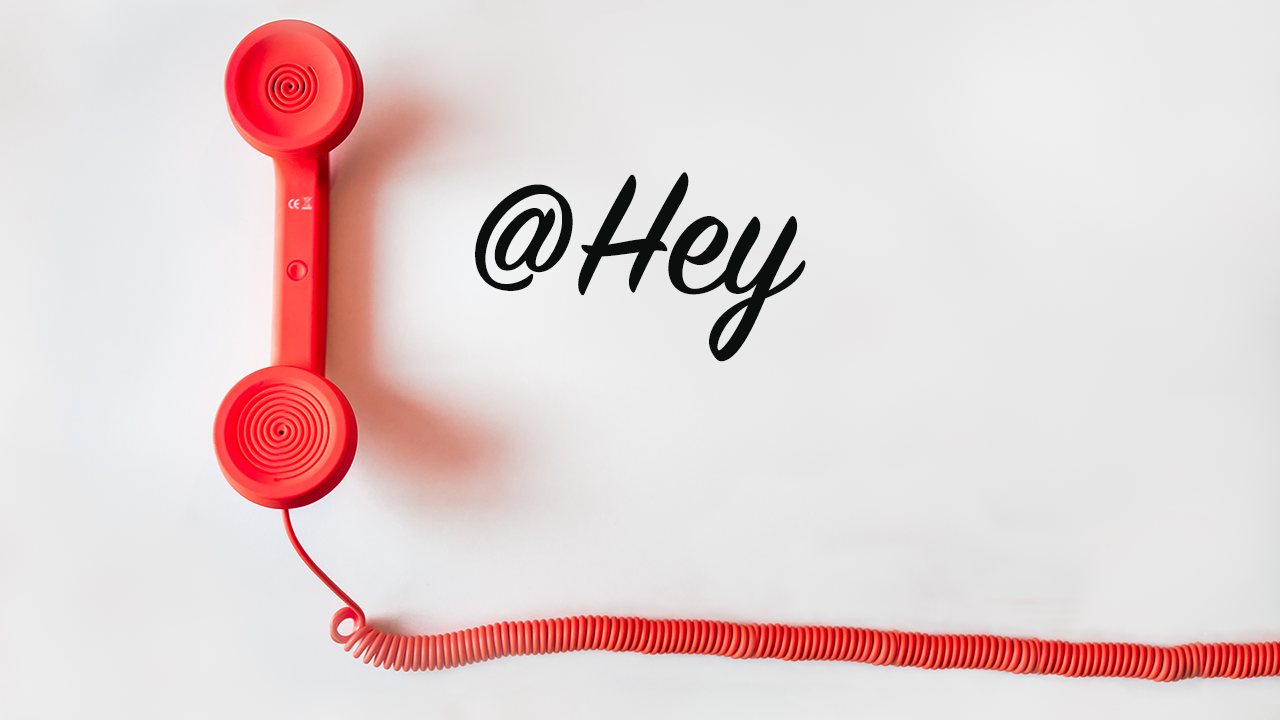
<style>
.page{position:relative;width:1280px;height:720px}
.page>*{position:absolute;margin:0}
.t1{font:189.9px "SignPainter-HouseScript";color:#0c0d0d}
</style>
<div class="page">
<p class="t1" style="left:475px;top:172px;width:331px;height:190px">@Hey</p>
</div>
